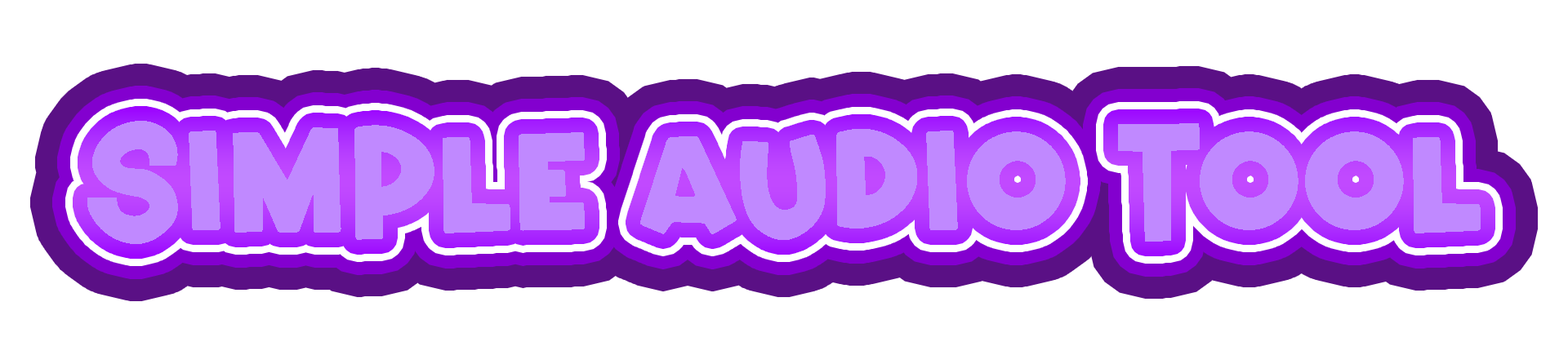
<style>
.page{position:relative;width:1568px;height:364px;background:#ffffff}
.page>*{position:absolute;margin:0}
.t1{font:154.2px "JusticeStoryRegular";letter-spacing:-0.001em;color:#c089ff}
</style>
<div class="page">
<p class="t1" style="left:87px;top:121px;width:1394px;height:123px">Simple Audio Tool</p>
</div>
